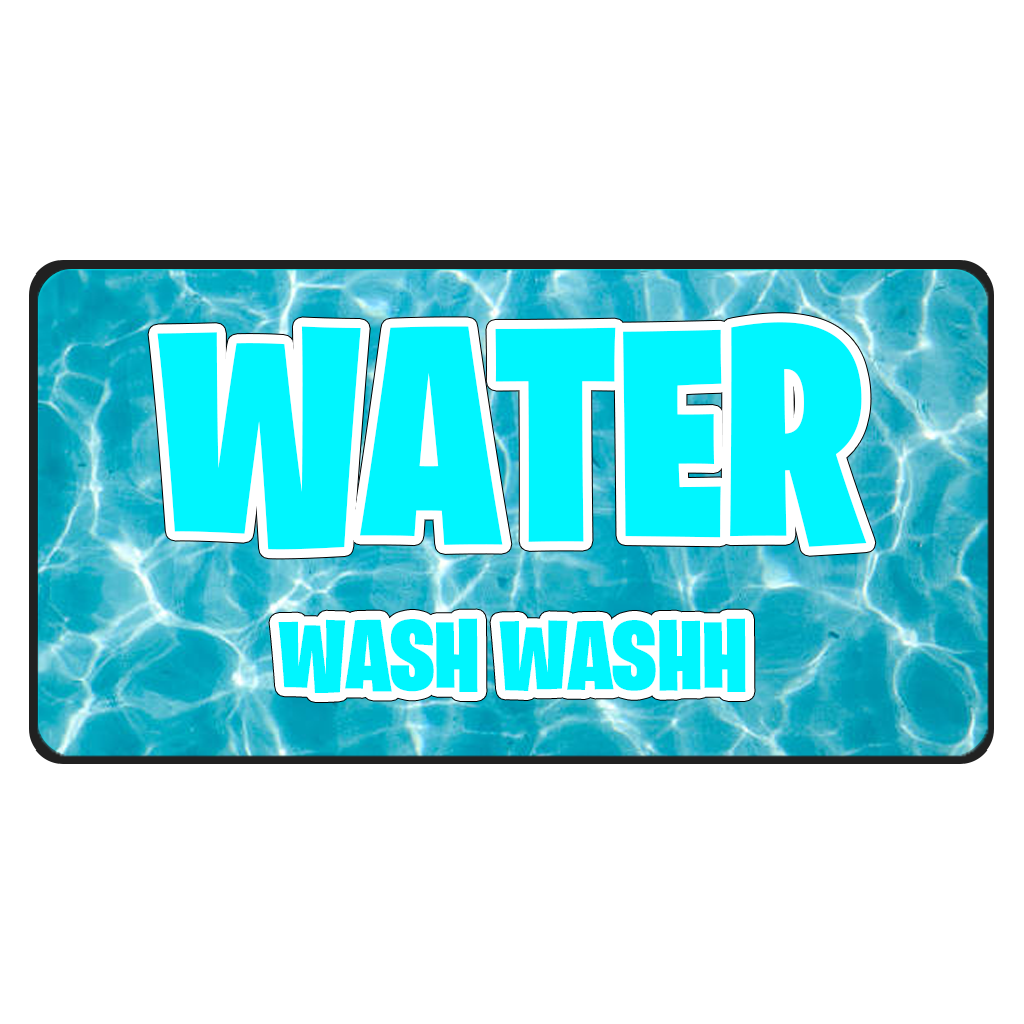
<style>
.page{position:relative;width:1024px;height:1024px;background:#ffffff}
.page>*{position:absolute;margin:0}
.t1{font:304.1px "BurbankBigCondensed-Black";color:#00f6ff}
.t2{font:100px "BurbankBigCondensed-Black";color:#00f6ff}
</style>
<div class="page">
<p class="t1" style="left:157px;top:322px;width:710px;height:228px">WATER</p>
<p class="t2" style="left:278px;top:618px;width:468px;height:75px">WASH WASHH</p>
</div>
